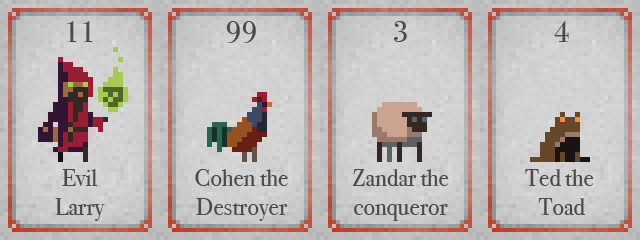
<style>
.page{position:relative;width:640px;height:240px}
.page>*{position:absolute;margin:0}
.t1{font:24px "BodoniSvtyTwoITCTT-Book";color:#4b4a4a}
.t2{font:30px "BodoniSvtyTwoITCTT-Book";color:#4b4a4a}
</style>
<div class="page">
<p class="t1" style="left:195px;top:21px;width:93px;height:200px;text-align:center"><span class="t2">99<br></span><br><br><br><br>Cohen the<br>Destroyer</p>
<p class="t1" style="left:352px;top:21px;width:97px;height:200px;text-align:center"><span class="t2">3<br></span><br><br><br><br>Zandar the<br>conqueror</p>
<p class="t1" style="left:525px;top:21px;width:69px;height:194px;text-align:center"><span class="t2">4<br></span><br><br><br><br>Ted the <br>Toad</p>
</div>
